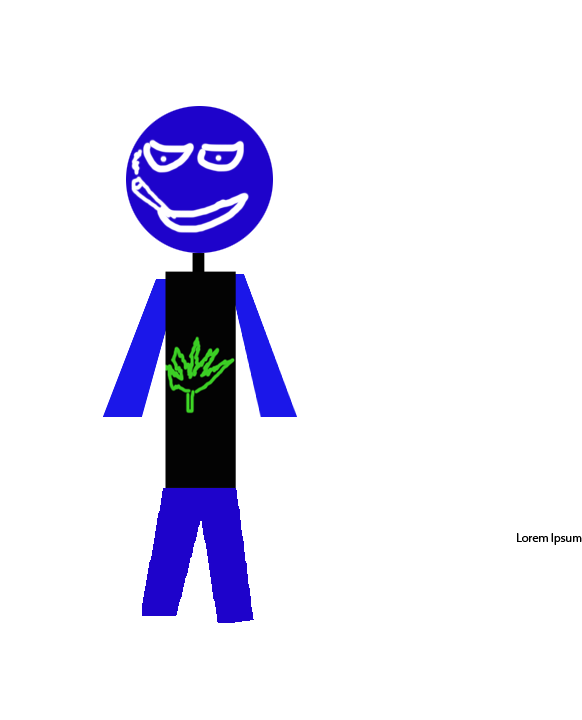
<style>
.page{position:relative;width:582px;height:720px;background:#ffffff}
.page>*{position:absolute;margin:0}
.t1{font:12px "MyriadPro-Regular";color:#010101}
</style>
<div class="page">
<p class="t1" style="left:517px;top:533px;width:65px;height:12px">Lorem Ipsum</p>
</div>
